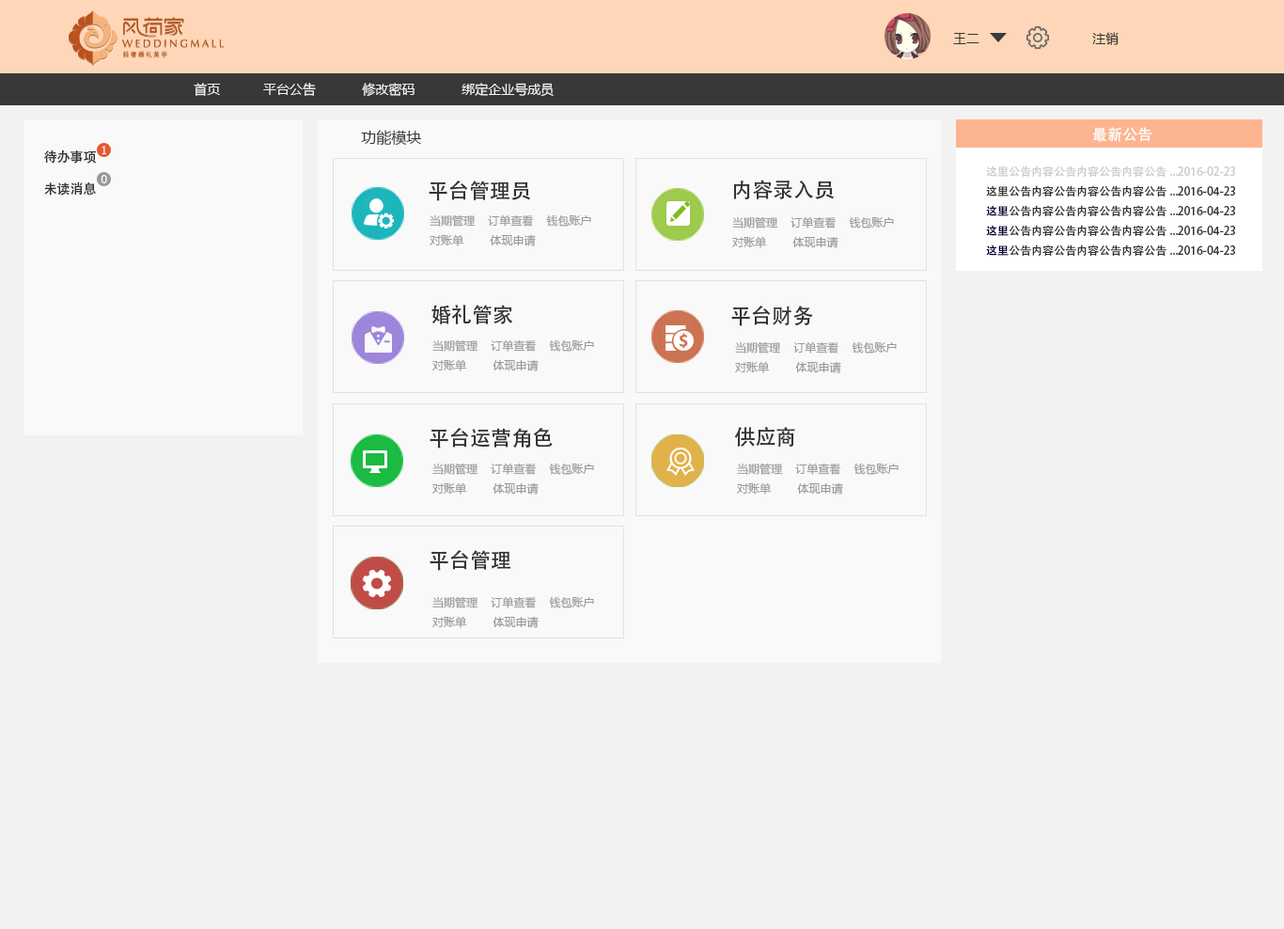
<style>
.page{position:relative;width:1284px;height:929px;background:#f2f2f2}
.page>*{position:absolute;margin:0}
.t1{font:13.2px "MicrosoftYaHei";color:#333333}
.t2{font:13.2px "MicrosoftYaHei";color:#f2f2f2}
.t3{font:15px "MicrosoftYaHei";color:#333333}
.t4{font:15px "AdobeHeitiStd-Regular";color:#fefefe}
.t5{font:13.2px "SimSun";color:#ffffff}
.t6{font:13.2px/16px "AdobeHeitiStd-Regular";color:#333333}
.t7{font:11.3px "AdobeHeitiStd-Regular";color:#cccccc}
.t8{font:11.3px "AdobeHeitiStd-Regular";color:#333333}
.t9{font:11.3px "AdobeHeitiStd-Regular";color:#000033}
.t10{font:20.7px "AdobeHeitiStd-Regular";color:#333333}
.t11{font:11.3px "MicrosoftYaHei";color:#999999}
</style>
<div class="page">
<p class="t1" style="left:953px;top:32px;width:166px;height:13px">王二                             注销</p>
<p class="t2" style="left:194px;top:83px;width:360px;height:14px">首页           平台公告            修改密码            绑定企业号成员</p>
<p class="t3" style="left:361px;top:130px;width:60px;height:15px">功能模块</p>
<p class="t4" style="left:1093px;top:127px;width:59px;height:15px">最新公告</p>
<p class="t5" style="left:102px;top:146px;width:4px;height:8px">1</p>
<p class="t6" style="left:44px;top:150px;width:52px;height:46px">待办事项<br><br>未读消息</p>
<p class="t7" style="left:986px;top:165px;width:249px;height:91px">这里公告内容公告内容公告内容公告...2016-02-23<br><span class="t8">这里公告内容公告内容公告内容公告...2016-04-23<br></span><span class="t9">这里</span><span class="t8">公告内容公告内容公告内容公告...2016-04-23<br></span><span class="t9">这里</span><span class="t8">公告内容公告内容公告内容公告...2016-04-23<br></span><span class="t9">这里</span><span class="t8">公告内容公告内容公告内容公告...2016-04-23</span></p>
<p class="t5" style="left:101px;top:175px;width:6px;height:8px">0</p>
<p class="t10" style="left:429px;top:180px;width:101px;height:21px">平台管理员</p>
<p class="t10" style="left:733px;top:180px;width:101px;height:20px">内容录入员</p>
<p class="t11" style="left:430px;top:214px;width:161px;height:32px">当期管理    订单查看    钱包账户    <br>对账单        体现申请</p>
<p class="t11" style="left:732px;top:216px;width:162px;height:32px">当期管理    订单查看    钱包账户    <br>对账单        体现申请</p>
<p class="t10" style="left:431px;top:305px;width:81px;height:19px">婚礼管家</p>
<p class="t10" style="left:731px;top:305px;width:82px;height:21px">平台财务</p>
<p class="t11" style="left:432px;top:339px;width:162px;height:32px">当期管理    订单查看    钱包账户    <br>对账单        体现申请</p>
<p class="t11" style="left:735px;top:341px;width:162px;height:32px">当期管理    订单查看    钱包账户    <br>对账单        体现申请</p>
<p class="t10" style="left:430px;top:428px;width:123px;height:20px">平台运营角色</p>
<p class="t10" style="left:734px;top:427px;width:61px;height:19px">供应商</p>
<p class="t11" style="left:432px;top:462px;width:162px;height:32px">当期管理    订单查看    钱包账户    <br>对账单        体现申请</p>
<p class="t11" style="left:737px;top:462px;width:162px;height:32px">当期管理    订单查看    钱包账户    <br>对账单        体现申请</p>
<p class="t10" style="left:430px;top:550px;width:80px;height:21px">平台管理</p>
<p class="t11" style="left:432px;top:596px;width:162px;height:32px">当期管理    订单查看    钱包账户    <br>对账单        体现申请</p>
</div>
